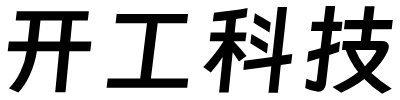
<style>
.page{position:relative;width:400px;height:100px;background:#ffffff}
.page>*{position:absolute;margin:0}
.t1{font:100px "DingTalk-JinBuTi";color:#000000}
</style>
<div class="page">
<p class="t1" style="left:7px;top:5px;width:386px;height:89px">开工科技</p>
</div>
